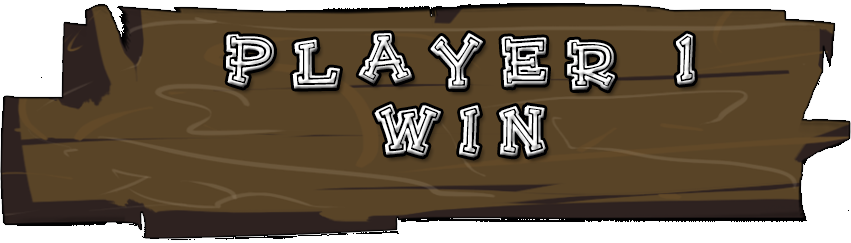
<style>
.page{position:relative;width:851px;height:243px;background:#594427}
.page>*{position:absolute;margin:0}
.t1{font:72px/14px "HeeHaw-Regular";letter-spacing:0.2em;color:#ffffff}
</style>
<div class="page">
<p class="t1" style="left:226px;top:33px;width:469px;height:125px;text-align:center">Player 1<br><br><br><br><br>Win</p>
</div>
